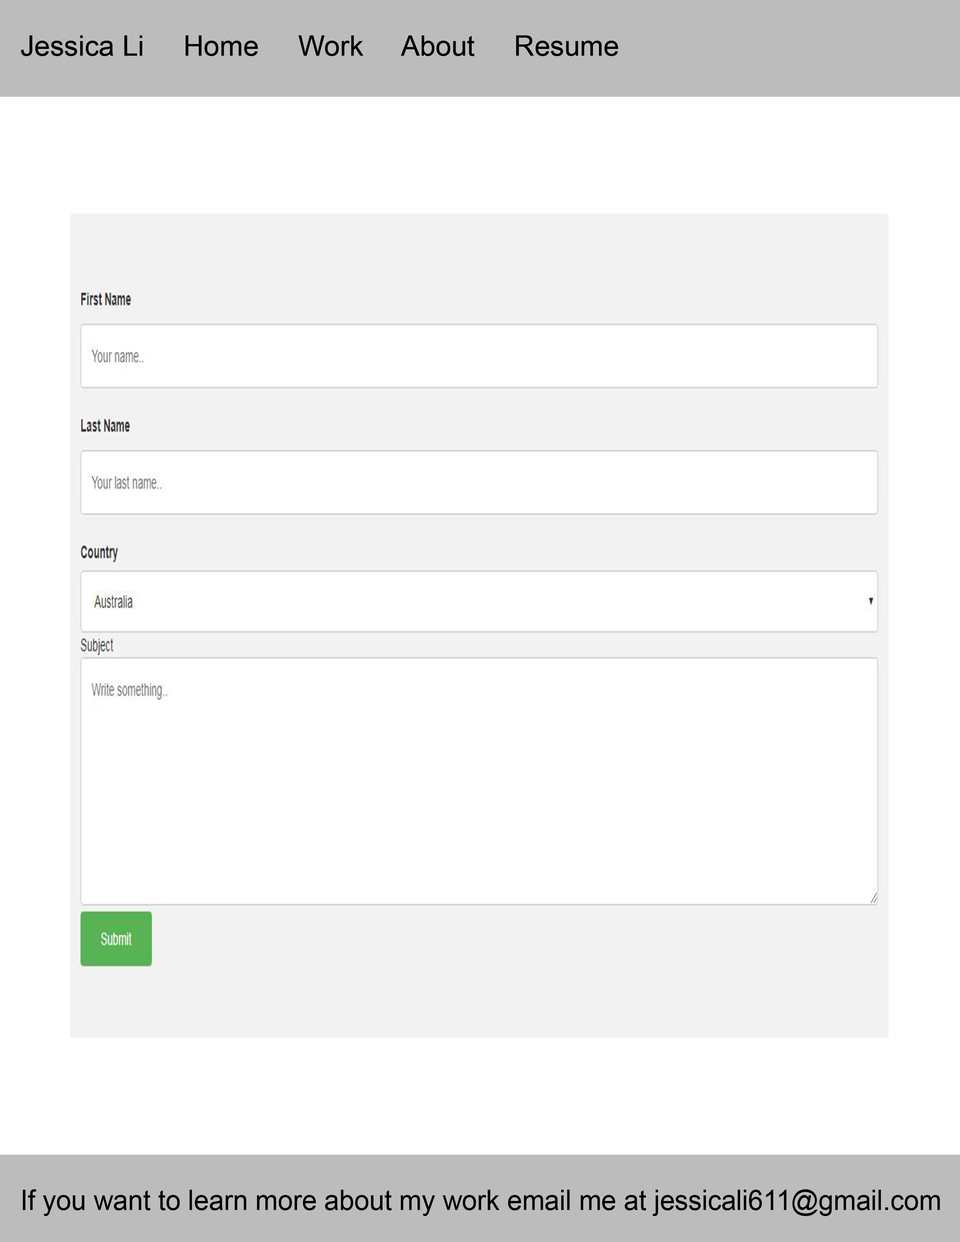
<style>
.page{position:relative;width:960px;height:1242px;background:#ffffff}
.page>*{position:absolute;margin:0}
.t1{font:28.2px "ArialMT";color:#000000}
.t2{font:28.2px "ArialMT";color:#000000;scale:0.95 1}
</style>
<div class="page">
<p class="t1" style="left:21px;top:35px;width:597px;height:21px">Jessica Li     Home     Work     About     Resume</p>
<p class="t2" style="left:23px;top:1190px;width:917px;height:26px">If you want to learn more about my work email me at jessicali611@gmail.com</p>
</div>
